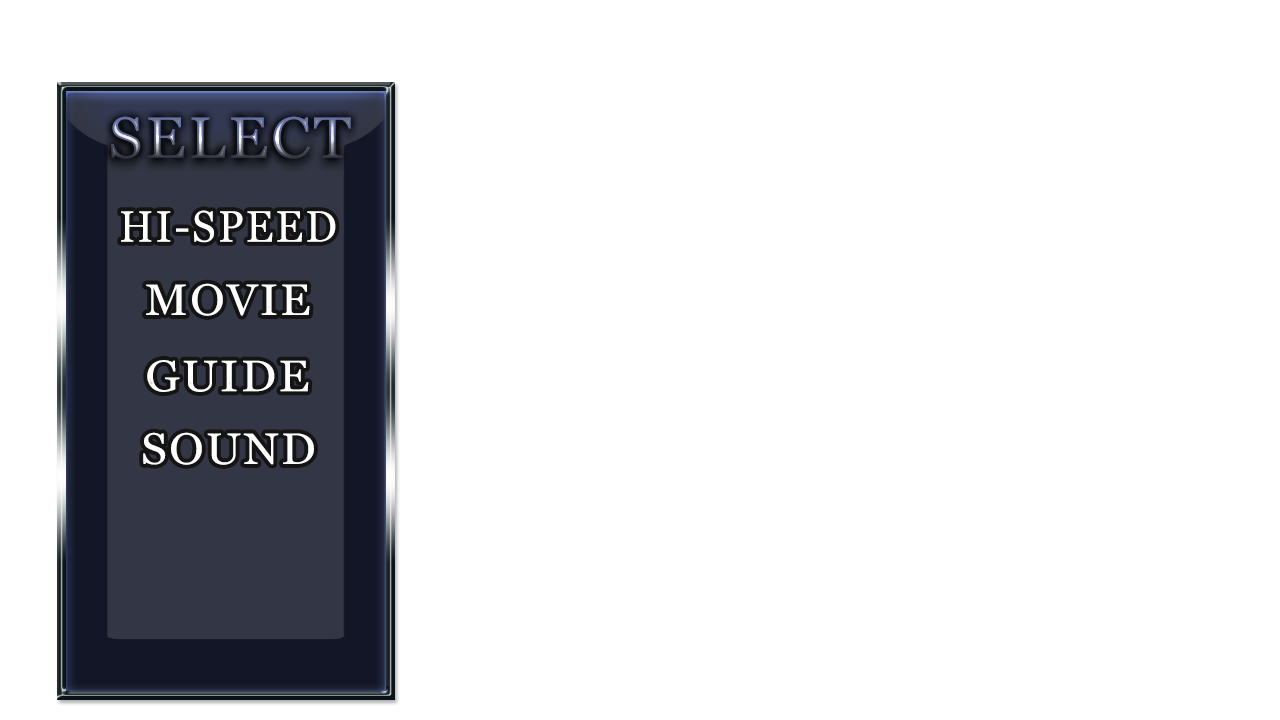
<style>
.page{position:relative;width:1280px;height:720px;background:#ffffff}
.page>*{position:absolute;margin:0}
.t1{font:58px "Vani";letter-spacing:0.05em;scale:1.05 1}
.t2{font:44px "Vani";letter-spacing:0.05em;color:#ffffff;scale:0.96 1}
.t3{font:44px "Vani";letter-spacing:0.05em;color:#ffffff;scale:1.05 1}
.t4{font:44px "Vani";letter-spacing:0.05em;color:#ffffff;scale:1.07 1}
</style>
<div class="page">
<p class="t1" style="left:111px;top:116px;width:240px;height:43px">SELECT</p>
<p class="t2" style="left:121px;top:210px;width:215px;height:33px">HI-SPEED</p>
<p class="t3" style="left:146px;top:283px;width:164px;height:33px">MOVIE</p>
<p class="t4" style="left:147px;top:360px;width:162px;height:32px">GUIDE</p>
<p class="t3" style="left:143px;top:432px;width:171px;height:33px">SOUND</p>
</div>
